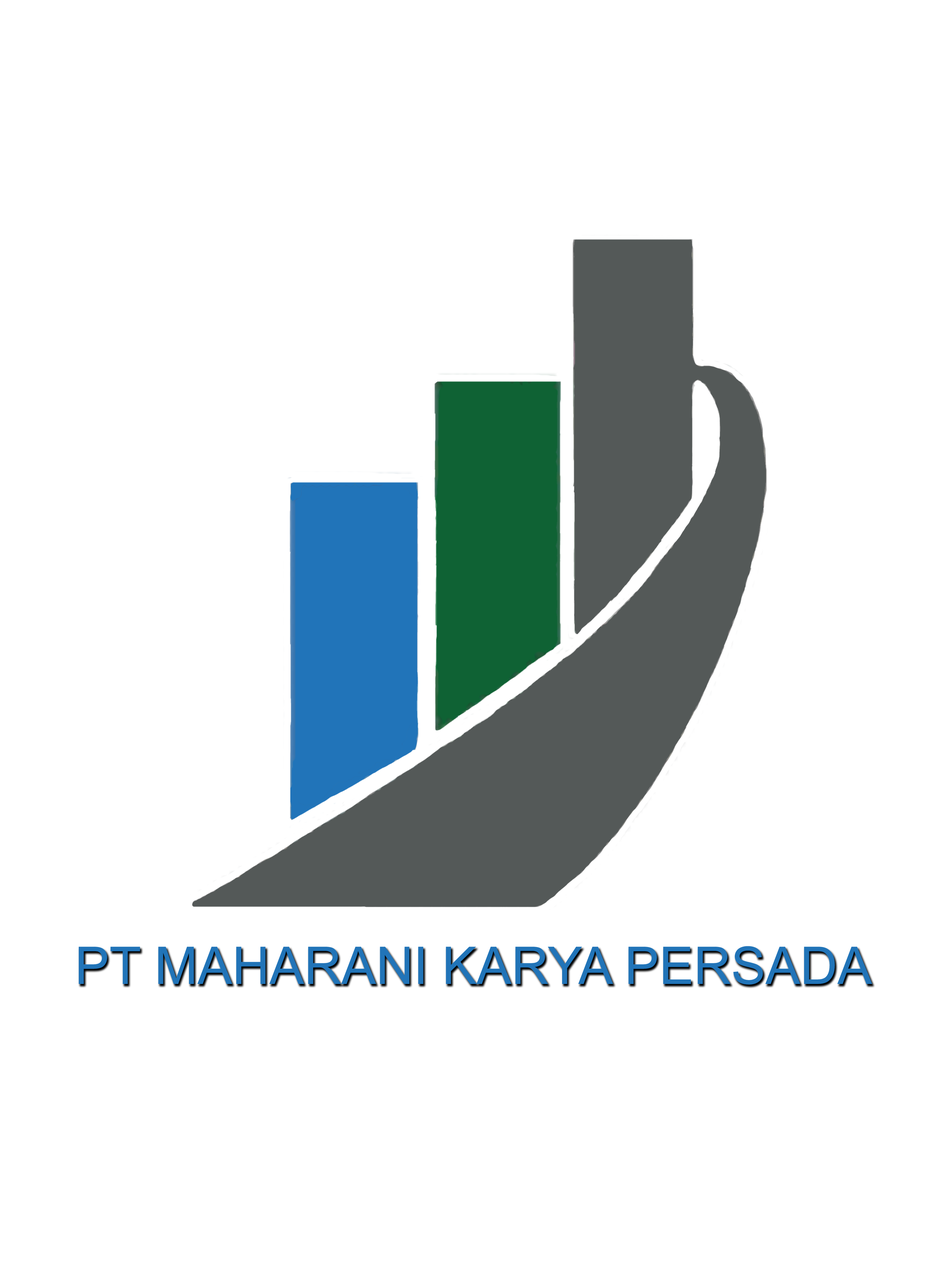
<style>
.page{position:relative;width:944px;height:1263px;background:#ffffff}
.page>*{position:absolute;margin:0}
.t1{font:51.8px "ArialMT";color:#2174b8}
</style>
<div class="page">
<p class="t1" style="left:79px;top:946px;width:793px;height:39px">PT MAHARANI KARYA PERSADA</p>
</div>
